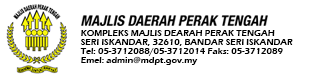
<style>
.page{position:relative;width:314px;height:77px;background:#ffffff}
.page>*{position:absolute;margin:0}
.t1{font:9px "ErasITC-Demi";color:#000000}
</style>
<div class="page">
<p class="t1" style="left:81px;top:30px;width:194px;height:6px">KOMPLEKS MAJLIS DEARAH PERAK TENGAH</p>
<p class="t1" style="left:80px;top:39px;width:213px;height:7px">SERI ISKANDAR, 32610, BANDAR SERI ISKANDAR</p>
<p class="t1" style="left:80px;top:48px;width:203px;height:8px">Tel: 05-3712088/05-3712014 Faks: 05-3712089</p>
<p class="t1" style="left:81px;top:56px;width:117px;height:9px">Emel: admin@mdpt.gov.my</p>
</div>
